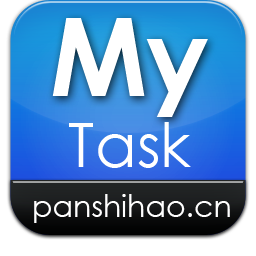
<style>
.page{position:relative;width:256px;height:256px;background:#ffffff}
.page>*{position:absolute;margin:0}
.t1{font:107.7px "CenturyGothic-Bold";color:#ffffff}
.t2{font:61.4px "CenturyGothic";color:#ffffff}
.t3{font:30px "CenturyGothic";color:#ffffff}
</style>
<div class="page">
<p class="t1" style="left:52px;top:18px;width:156px;height:99px">My</p>
<p class="t2" style="left:69px;top:122px;width:122px;height:46px">Task</p>
<p class="t3" style="left:34px;top:194px;width:196px;height:29px">panshihao.cn</p>
</div>
